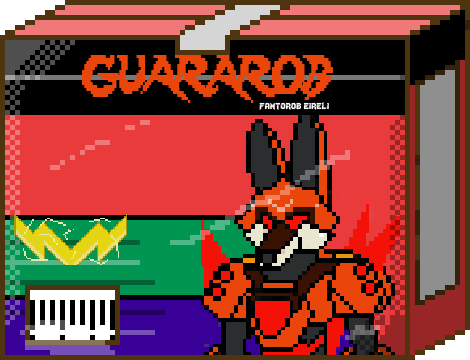
<style>
.page{position:relative;width:470px;height:360px}
.page>*{position:absolute;margin:0}
.t1{font:48px "Lady-Radical";color:#ea460c;scale:0.72 1}
.t2{font:12px "Lady-Radical";color:#fbfbfb}
</style>
<div class="page">
<p class="t1" style="left:82px;top:55px;width:251px;height:48px">GUARAROB</p>
<p class="t2" style="left:259px;top:102px;width:70px;height:8px">fantorob eireli</p>
</div>
